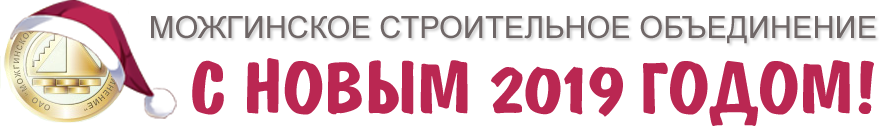
<style>
.page{position:relative;width:889px;height:126px;background:#ffffff}
.page>*{position:absolute;margin:0}
.t1{font:30.7px "ArialMT";color:#6f6767}
.t2{font:73.3px "DomkratBold";color:#ba2752}
</style>
<div class="page">
<p class="t1" style="left:151px;top:15px;width:725px;height:29px">МОЖГИНСКОЕ СТРОИТЕЛЬНОЕ ОБЪЕДИНЕНИЕ</p>
<p class="t2" style="left:192px;top:58px;width:682px;height:68px">С НОВЫМ 2019 ГОДОМ!</p>
</div>
